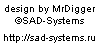
<style>
.page{position:relative;width:100px;height:50px;background:#ffffff}
.page>*{position:absolute;margin:0}
.t1{font:10px "ArialMT";color:#000000}
</style>
<div class="page">
<p class="t1" style="left:5px;top:5px;width:90px;height:21px;text-align:center">design by MrDigger<br>©SAD-Systems</p>
<p class="t1" style="left:4px;top:34px;width:91px;height:9px">http://sad-systems.ru</p>
</div>
